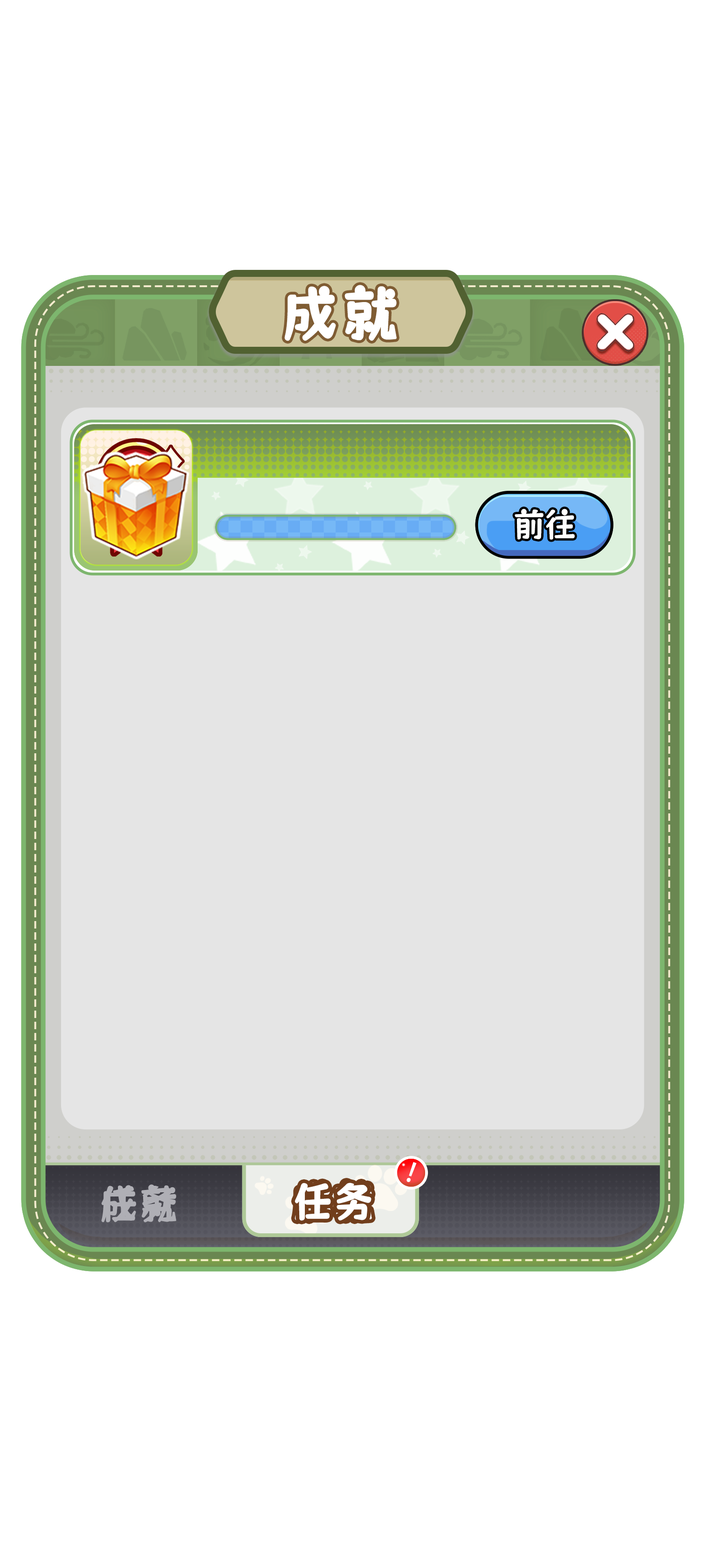
<style>
.page{position:relative;width:702px;height:1568px;background:#ffffff}
.page>*{position:absolute;margin:0}
.t1{font:41.4px "MaokenZhuyuanTi-Regular";letter-spacing:0.04em;color:#afafb5;scale:0.93 1}
.t2{font:41.4px "MaokenZhuyuanTi-Regular";letter-spacing:0.04em;color:#ffffff;font-weight:bold;scale:0.93 1}
</style>
<div class="page">
<p class="t1" style="left:101px;top:1186px;width:75px;height:37px">任务</p>
<p class="t1" style="left:101px;top:1184px;width:75px;height:38px">成就</p>
<p class="t2" style="left:295px;top:1183px;width:76px;height:38px">任务</p>
</div>
